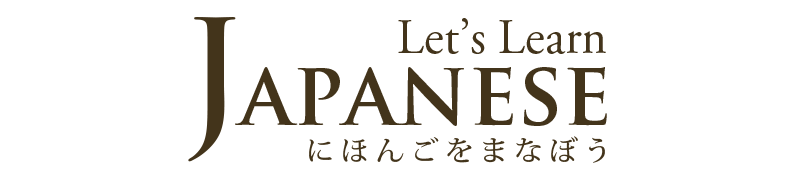
<style>
.page{position:relative;width:800px;height:180px;background:#ffffff}
.page>*{position:absolute;margin:0}
.t1{font:142.4px "TrajanPro-Bold";color:#43341b;scale:0.93 1}
.t2{font:50.4px "AGaramondPro-Regular";color:#43341b}
.t3{font:88.9px "TrajanPro-Bold";color:#43341b;scale:0.95 1}
.t4{font:28px "KozMinPr6N-Medium";letter-spacing:0.2em;color:#43341b;scale:1.03 1}
</style>
<div class="page">
<p class="t1" style="left:188px;top:17px;width:48px;height:145px">J</p>
<p class="t2" style="left:398px;top:18px;width:208px;height:36px">Let’s Learn</p>
<p class="t3" style="left:235px;top:67px;width:372px;height:59px">apanese</p>
<p class="t4" style="left:309px;top:136px;width:296px;height:27px">にほんごをまなぼう</p>
</div>
